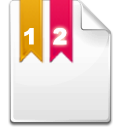
<style>
.page{position:relative;width:128px;height:128px;background:#ffffff}
.page>*{position:absolute;margin:0}
.t1{font:22.3px "Arial-Black";color:#ffffff;font-variant:small-caps}
</style>
<div class="page">
<p class="t1" style="left:24px;top:28px;width:10px;height:17px">1</p>
<p class="t1" style="left:53px;top:28px;width:14px;height:17px">2</p>
</div>
